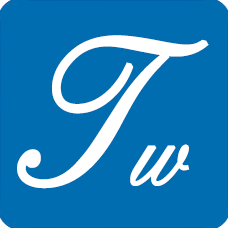
<style>
.page{position:relative;width:228px;height:228px;background:#006db1}
.page>*{position:absolute;margin:0}
.t1{font:216px "ElegantScript";color:#ffffff;font-weight:bold;scale:0.83 1}
.t2{font:120px "ElegantScript";color:#ffffff;font-weight:bold;scale:0.83 1}
</style>
<div class="page">
<p class="t1" style="left:17px;top:35px;width:192px;height:154px">T<span class="t2">w</span></p>
</div>
